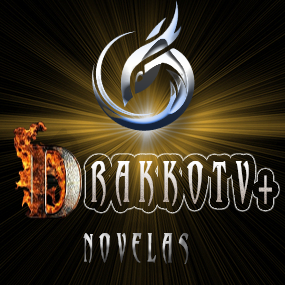
<style>
.page{position:relative;width:285px;height:285px}
.page>*{position:absolute;margin:0}
.t1{font:51.2px "Abaddon";letter-spacing:0.4em;text-transform:uppercase;font-weight:bold;scale:0.46 1}
.t2{font:51.2px "MyriadPro-Regular";letter-spacing:0.4em;text-transform:uppercase;font-weight:bold;scale:0.46 1}
.t3{font:34.9px "Abaddon";letter-spacing:0.4em;text-transform:uppercase;font-weight:bold;scale:0.46 1}
</style>
<div class="page">
<p class="t1" style="left:91px;top:161px;width:181px;height:45px">RAKKOTV<span class="t2">+</span></p>
<p class="t3" style="left:83px;top:233px;width:106px;height:31px">NOVELAS</p>
</div>
